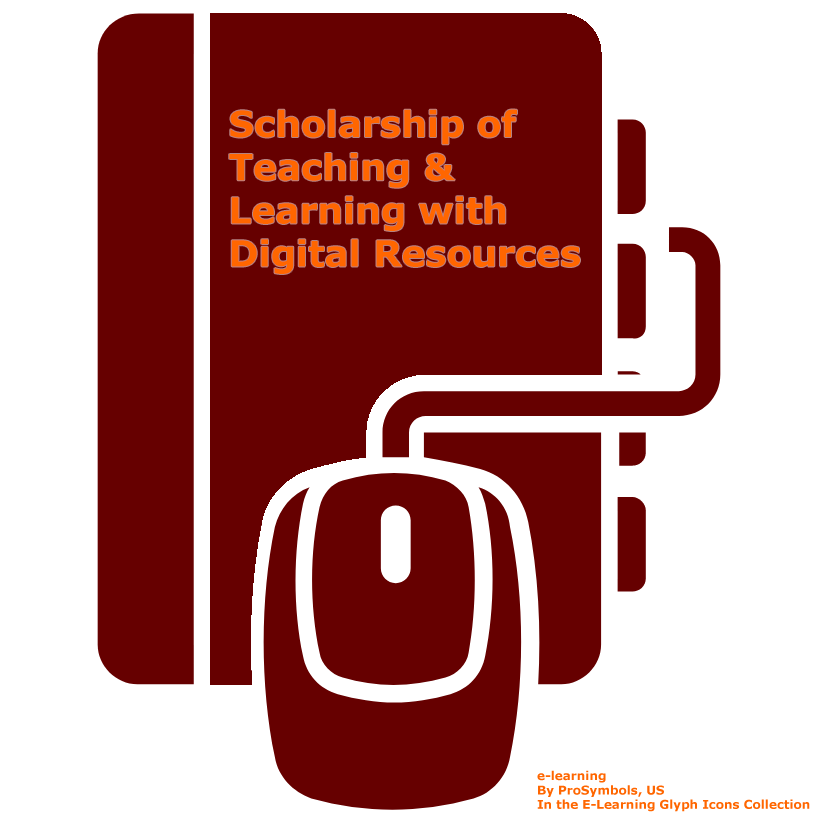
<style>
.page{position:relative;width:822px;height:822px;background:#ffffff}
.page>*{position:absolute;margin:0}
.t1{font:36px "Verdana-Bold";color:#ff6600}
.t2{font:12px "Verdana-Bold";color:#ff6600}
</style>
<div class="page">
<p class="t1" style="left:229px;top:109px;width:351px;height:165px">Scholarship of <br>Teaching &amp; <br>Learning with <br>Digital Resources</p>
<p class="t2" style="left:537px;top:770px;width:273px;height:42px">e-learning <br>By ProSymbols, US <br>In the E-Learning Glyph Icons Collection</p>
</div>
